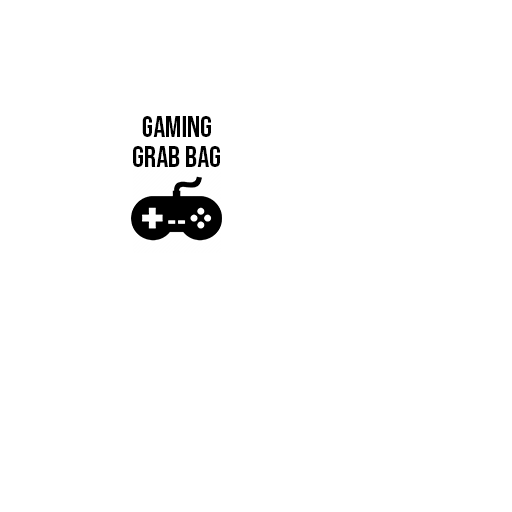
<style>
.page{position:relative;width:512px;height:512px;background:#ffffff}
.page>*{position:absolute;margin:0}
.t1{font:30px/30px "BebasNeue-Regular";color:#000000}
</style>
<div class="page">
<p class="t1" style="left:133px;top:116px;width:87px;height:51px;text-align:center">gaming<br>grab bag</p>
</div>
